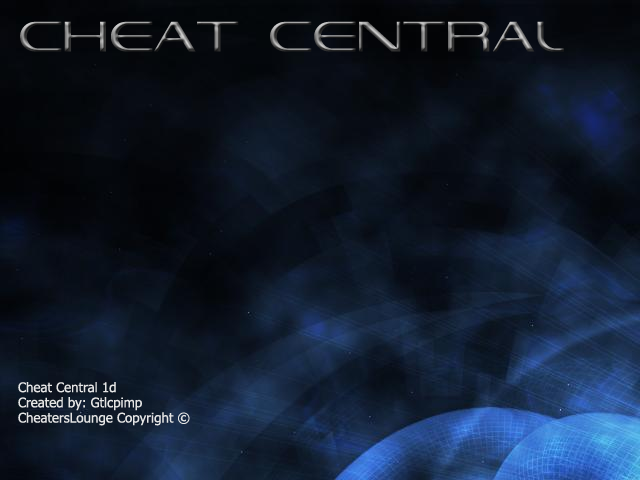
<style>
.page{position:relative;width:640px;height:480px}
.page>*{position:absolute;margin:0}
.t1{font:60px "VandianaPlatinLite"}
.t2{font:13.3px/15.2px "Tahoma";color:#e5e5e5}
</style>
<div class="page">
<p class="t1" style="left:20px;top:21px;width:544px;height:31px">Cheat Central</p>
<p class="t2" style="left:18px;top:382px;width:172px;height:44px">Cheat Central 1d<br>Created by: Gtlcpimp<br>CheatersLounge Copyright ©</p>
</div>
